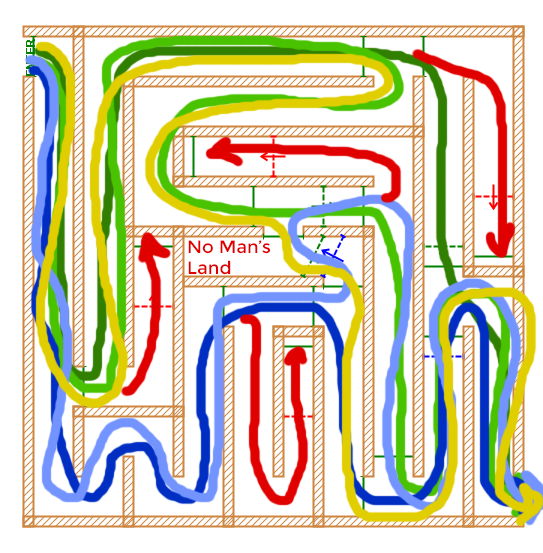
<style>
.page{position:relative;width:543px;height:553px;background:#ffffff}
.page>*{position:absolute;margin:0}
.t1{font:18px "Montserrat-Regular";color:#e10000}
</style>
<div class="page">
<p class="t1" style="left:188px;top:240px;width:82px;height:35px">No Man’s<br>Land</p>
</div>
